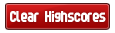
<style>
.page{position:relative;width:115px;height:33px;background:#ffffff}
.page>*{position:absolute;margin:0}
.t1{font:14px "FontopoFONTOPO";color:#ffffff}
</style>
<div class="page">
<p class="t1" style="left:10px;top:11px;width:96px;height:11px">Clear Highscores</p>
</div>
